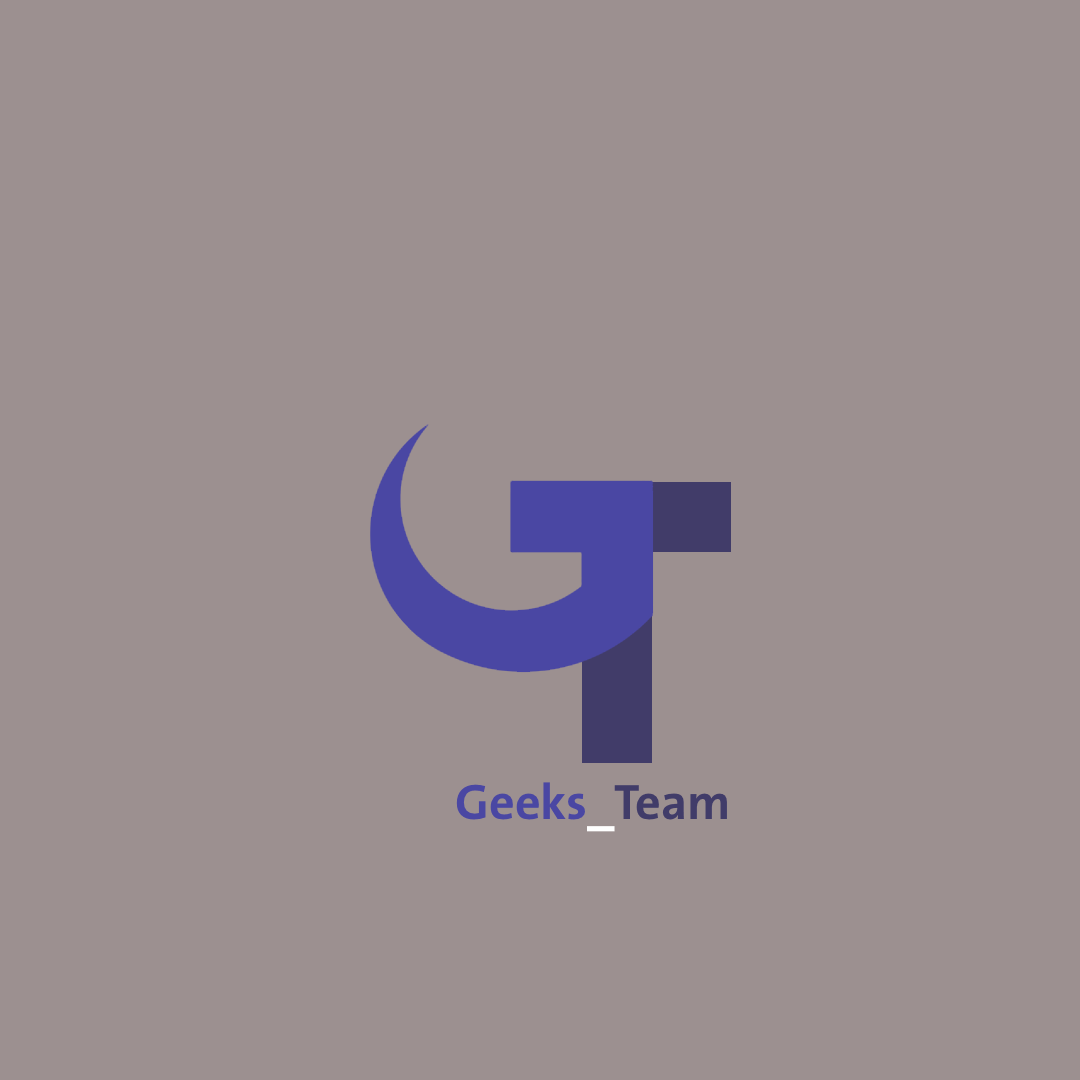
<style>
.page{position:relative;width:1080px;height:1080px;background:#9c9090}
.page>*{position:absolute;margin:0}
.t1{font:50.1px "TheSans-Bold";color:#4a47a3}
.t2{font:50.1px "TheSans-Bold";color:#ffffff}
.t3{font:50.1px "TheSans-Bold";color:#413c69}
</style>
<div class="page">
<p class="t1" style="left:456px;top:782px;width:271px;height:50px">Geeks<span class="t2">_</span><span class="t3">Team</span></p>
</div>
